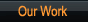
<style>
.page{position:relative;width:88px;height:22px}
.page>*{position:absolute;margin:0}
.t1{font:14px "ArialNarrow";color:#ff9933}
</style>
<div class="page">
<p class="t1" style="left:18px;top:5px;width:50px;height:12px">Our Work</p>
</div>
